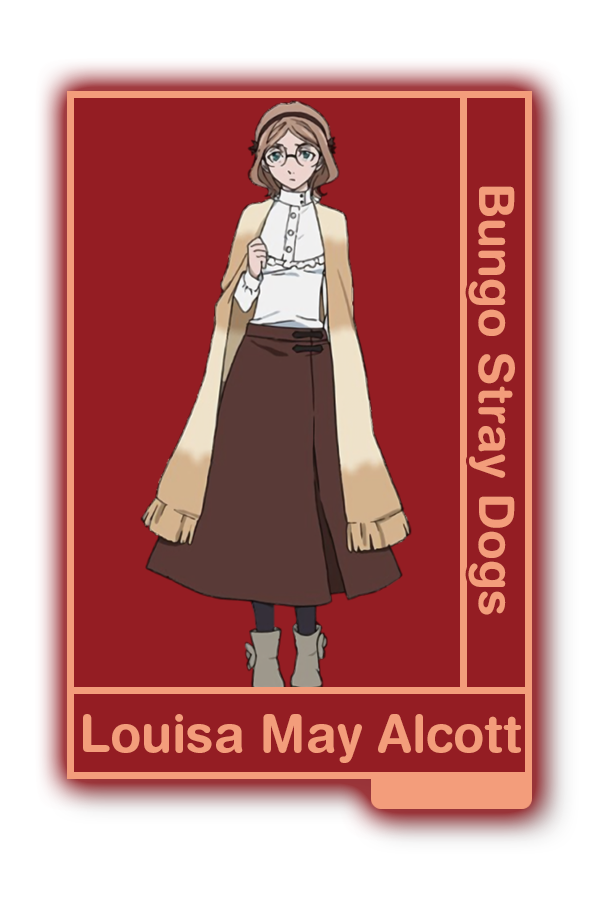
<style>
.page{position:relative;width:600px;height:900px;background:#941d23}
.page>*{position:absolute;margin:0}
.t1{font:48.8px "HelveticaRounded-Bold";color:#f39d7b}
.t2{font:50.9px "HelveticaRounded-Bold";color:#f39d7b}
</style>
<div class="page">
<p class="t1" style="left:468px;top:186px;width:47px;height:429px;rotate:90deg">Bungo Stray Dogs</p>
<p class="t2" style="left:83px;top:714px;width:438px;height:49px">Louisa May Alcott</p>
</div>
